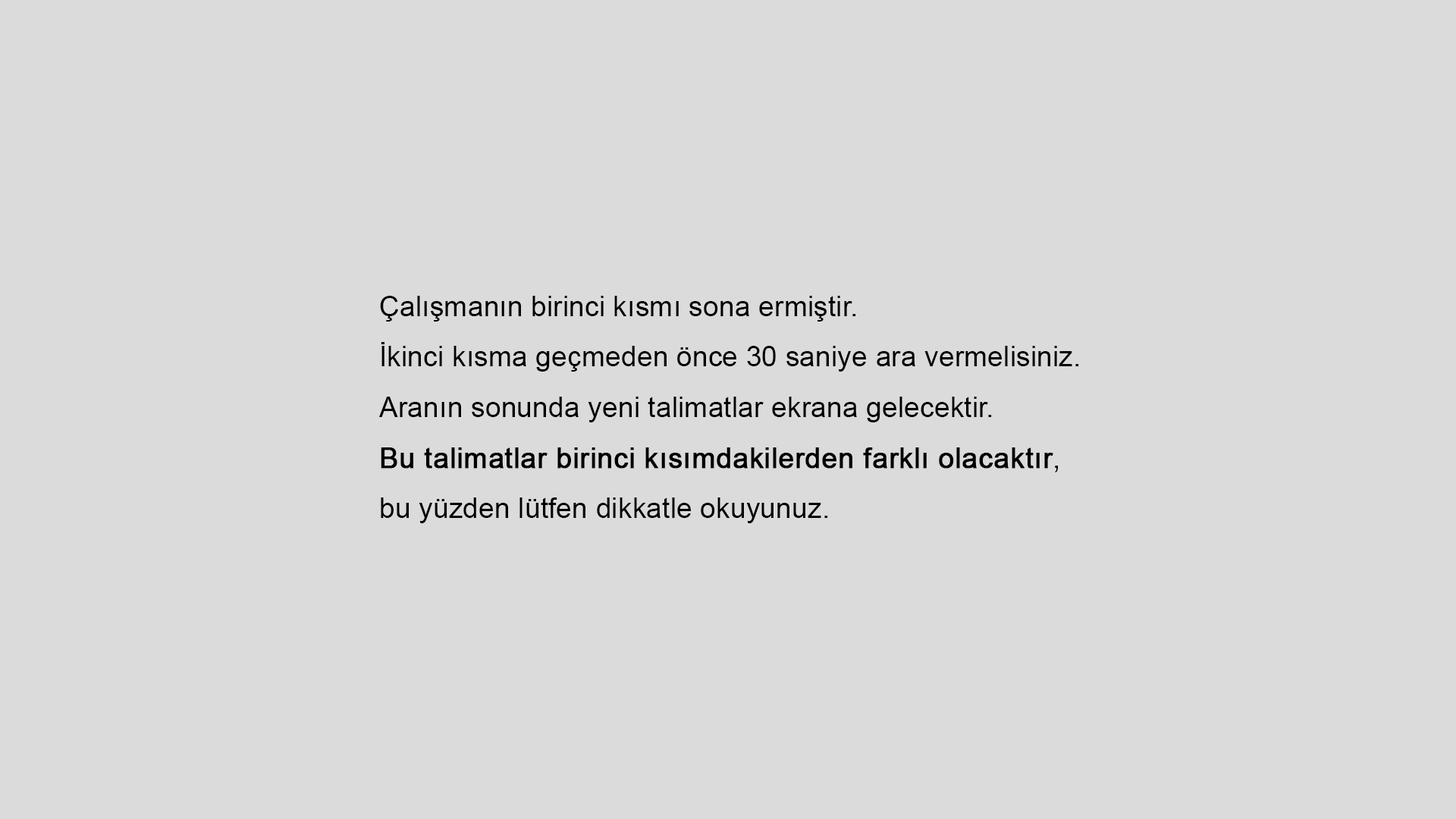
<style>
.page{position:relative;width:1456px;height:819px;background:#dbdbdb}
.page>*{position:absolute;margin:0}
.t1{font:28.4px/50.6px "ArialMT";color:#000000}
.t2{font:28.4px/50.6px "ArialMT";color:#000000;font-weight:bold}
</style>
<div class="page">
<p class="t1" style="left:379px;top:296px;width:700px;height:227px">Çalışmanın birinci kısmı sona ermiştir.<br>İkinci kısma geçmeden önce 30 saniye ara vermelisiniz.<br>Aranın sonunda yeni talimatlar ekrana gelecektir.<br><span class="t2">Bu talimatlar birinci kısımdakilerden farklı olacaktır</span>,<br>bu yüzden lütfen dikkatle okuyunuz.</p>
</div>
